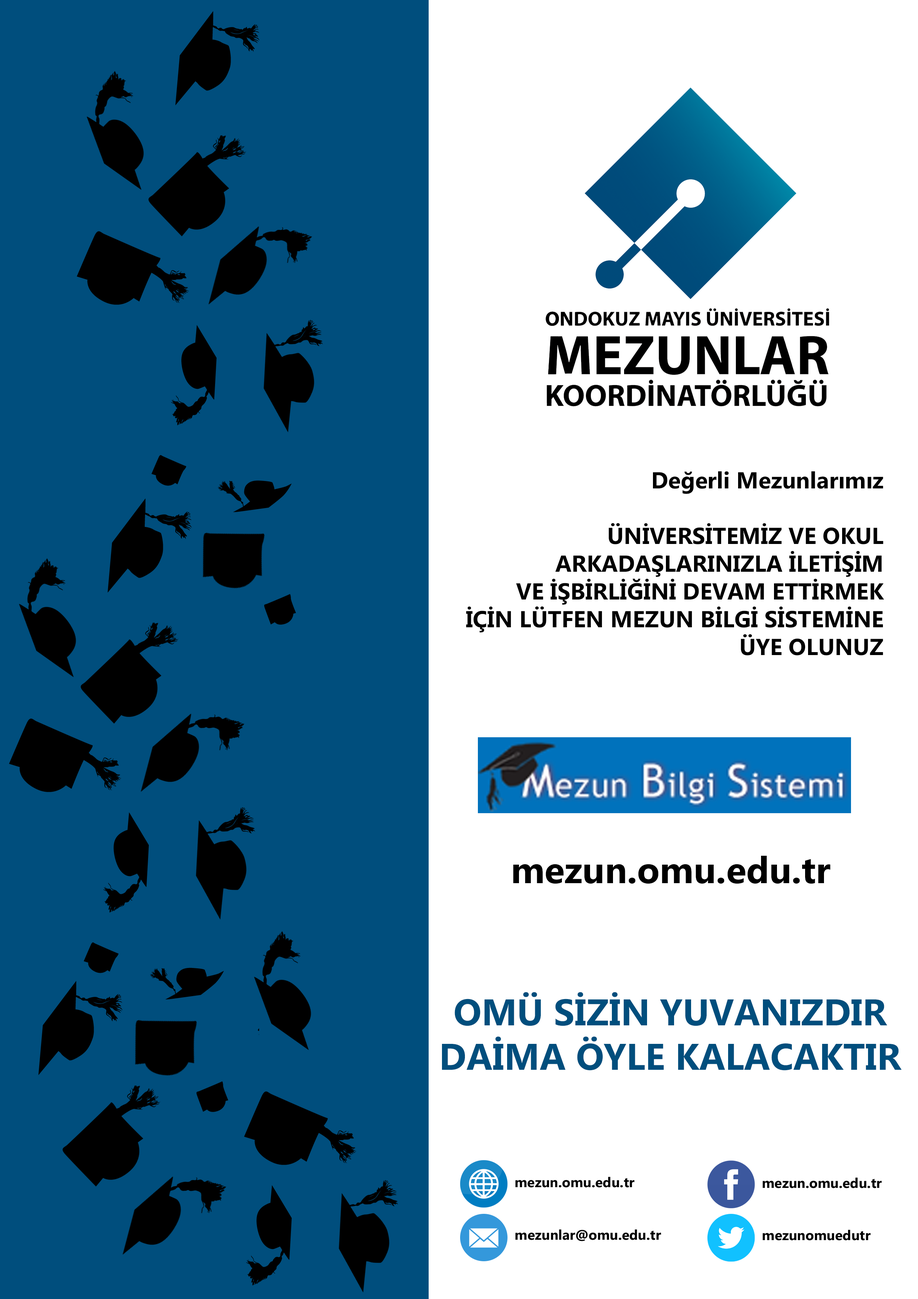
<style>
.page{position:relative;width:918px;height:1299px;background:#ffffff}
.page>*{position:absolute;margin:0}
.t1{font:23.1px "MicrosoftPhagsPa-Bold";color:#000000}
.t2{font:37px "MicrosoftPhagsPa-Bold";color:#000000}
.t3{font:37px "MicrosoftPhagsPa-Bold";color:#004e7d}
</style>
<div class="page">
<p class="t1" style="left:466px;top:471px;width:418px;height:184px;text-align:right">Değerli Mezunlarımız<br><br>ÜNİVERSİTEMİZ VE OKUL<br> ARKADAŞLARINIZLA İLETİŞİM<br> VE İŞBİRLİĞİNİ DEVAM ETTİRMEK<br>İÇİN LÜTFEN MEZUN BİLGİ SİSTEMİNE<br>ÜYE OLUNUZ</p>
<p class="t2" style="left:513px;top:856px;width:317px;height:28px">mezun.omu.edu.tr</p>
<p class="t3" style="left:442px;top:992px;width:460px;height:78px;text-align:center">OMÜ SİZİN YUVANIZDIR<br>DAİMA ÖYLE KALACAKTIR</p>
</div>
